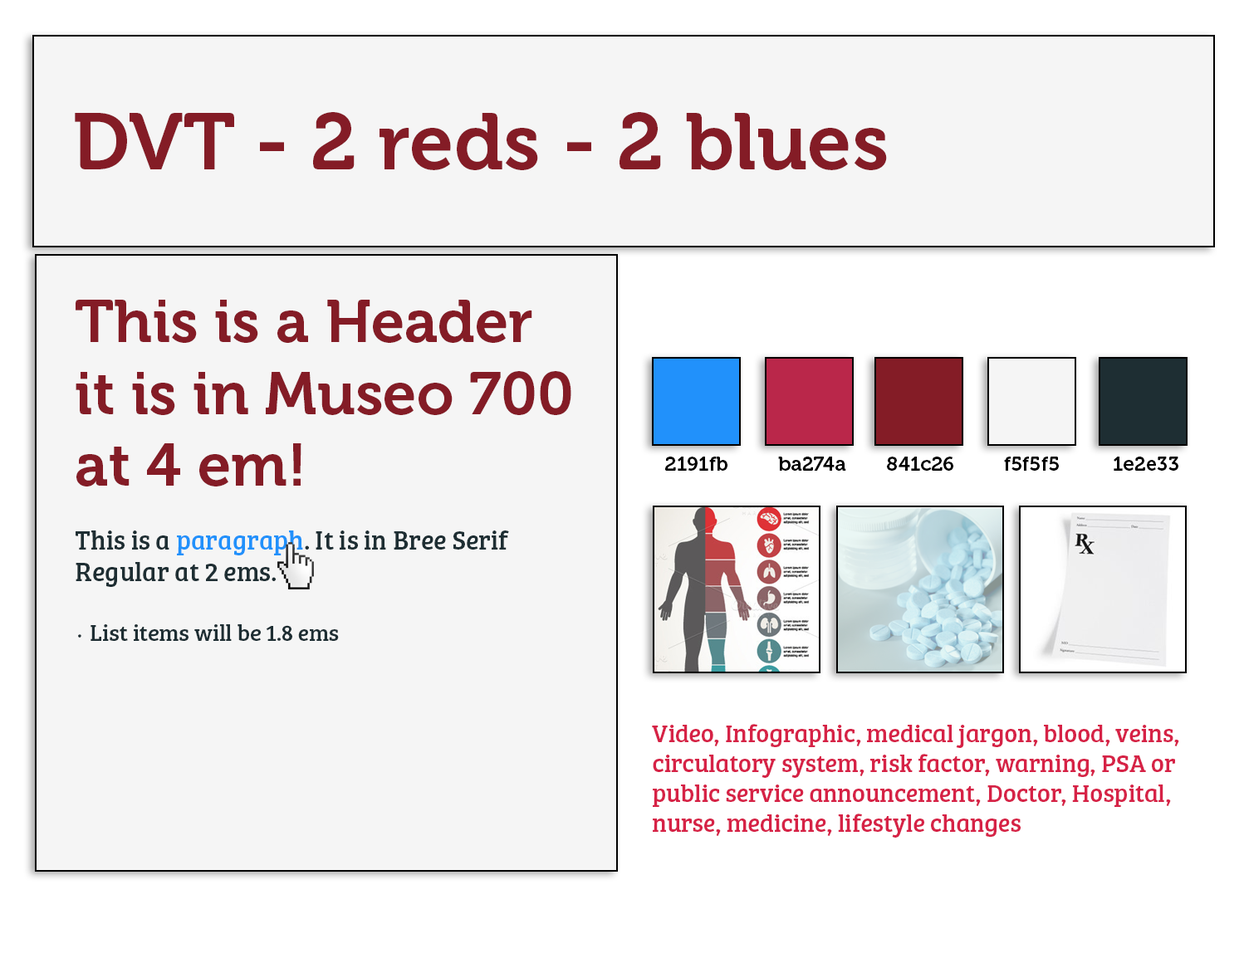
<style>
.page{position:relative;width:1244px;height:958px;background:#f5f5f5}
.page>*{position:absolute;margin:0}
.t1{font:79.7px "Museo-700";color:#841c26}
.t2{font:59.8px "Museo-700";color:#841c26}
.t3{font:26.6px "BreeSerif";color:#1e2e33}
.t4{font:26.6px "BreeSerif";color:#2191fb}
.t5{font:23.3px "MetallophileSp8-Light";color:#1e2e33}
.t6{font:23.3px "BreeSerif";color:#1e2e33}
.t7{font:19.9px "Museo-700";color:#000000}
.t8{font:24.9px "BreeSerif";color:#d62246}
</style>
<div class="page">
<p class="t1" style="left:75px;top:112px;width:812px;height:58px">DVT - 2 reds - 2 blues</p>
<p class="t2" style="left:76px;top:300px;width:495px;height:341px">This is a Header <br>it is in Museo 700<br>at 4 em!<br><br><span class="t3">This is a </span><span class="t4">paragraph</span><span class="t3">. It is in Bree Serif <br>Regular at 2 ems.<br><br></span><span class="t5">· </span><span class="t6">List items will be 1.8 ems</span></p>
<p class="t7" style="left:665px;top:457px;width:63px;height:14px">2191fb</p>
<p class="t7" style="left:778px;top:457px;width:68px;height:14px">ba274a</p>
<p class="t7" style="left:887px;top:457px;width:66px;height:14px">841c26</p>
<p class="t7" style="left:1004px;top:457px;width:55px;height:14px">f5f5f5</p>
<p class="t7" style="left:1114px;top:457px;width:65px;height:14px">1e2e33</p>
<p class="t8" style="left:652px;top:724px;width:527px;height:114px">Video, Infographic, medical jargon, blood, veins, <br>circulatory system, risk factor, warning, PSA or <br>public service announcement, Doctor, Hospital, <br>nurse, medicine, lifestyle changes</p>
</div>
